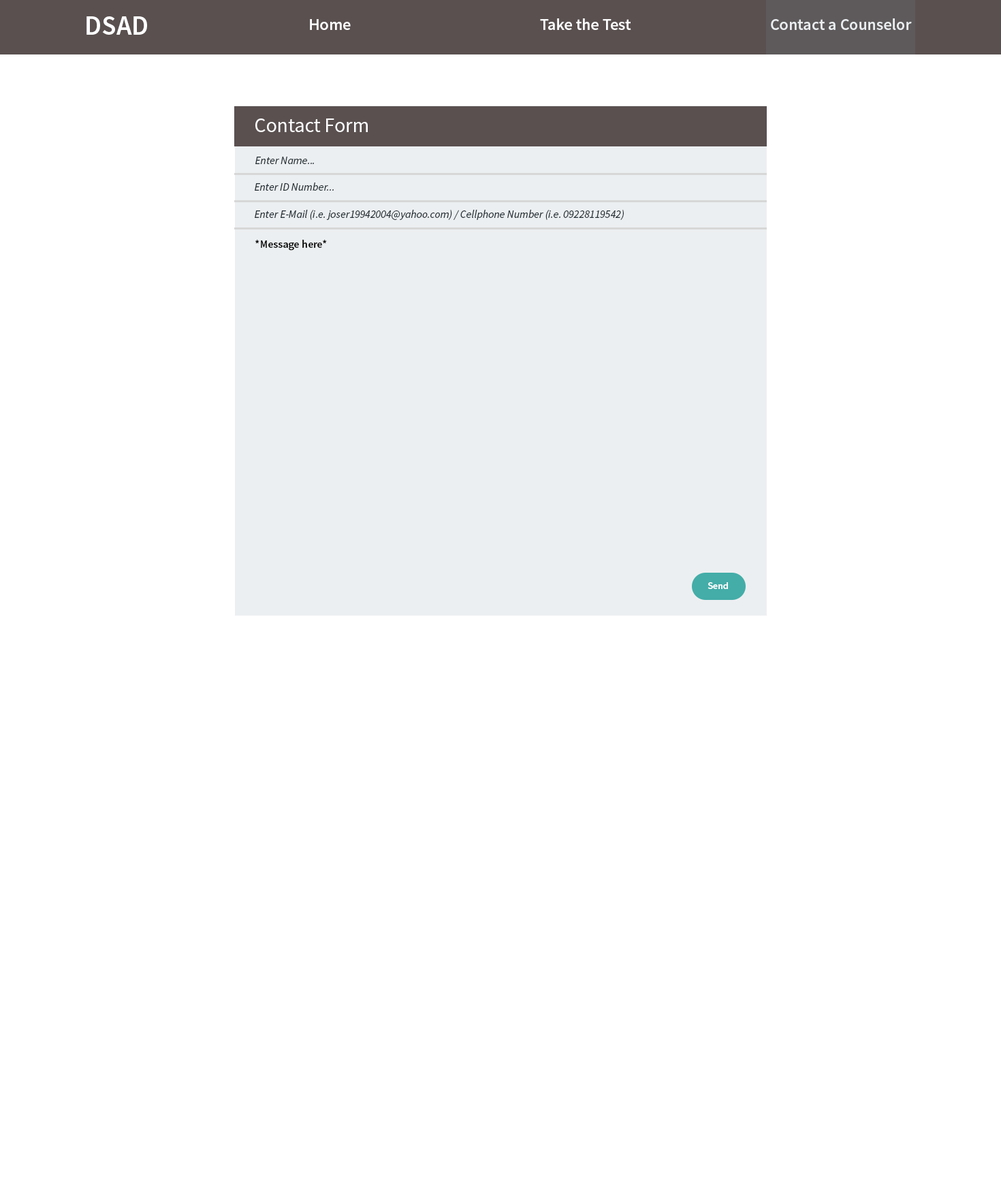
<style>
.page{position:relative;width:1001px;height:1191px;background:#ffffff}
.page>*{position:absolute;margin:0}
.t1{font:27.2px "SourceSansPro-Semibold";color:#ffffff}
.t2{font:16.3px "SourceSansPro-Semibold";color:#ffffff}
.t3{font:20.4px "SourceSansPro-Regular";color:#ffffff}
.t4{font:11px "SourceSansPro-It";color:#263238}
.t5{font:10.9px "SourceSansPro-Semibold";color:#000000}
.t6{font:9.5px "SourceSansPro-Semibold";color:#ffffff}
</style>
<div class="page">
<p class="t1" style="left:86px;top:16px;width:61px;height:19px">DSAD</p>
<p class="t2" style="left:310px;top:19px;width:41px;height:11px">Home</p>
<p class="t2" style="left:540px;top:18px;width:91px;height:12px">Take the Test</p>
<p class="t2" style="left:771px;top:18px;width:141px;height:12px">Contact a Counselor</p>
<p class="t3" style="left:255px;top:118px;width:113px;height:14px">Contact Form</p>
<p class="t4" style="left:255px;top:157px;width:59px;height:7px">Enter Name...</p>
<p class="t4" style="left:255px;top:183px;width:79px;height:8px">Enter ID Number...</p>
<p class="t4" style="left:255px;top:210px;width:369px;height:10px">Enter E-Mail (i.e. joser19942004@yahoo.com) / Cellphone Number (i.e. 09228119542)</p>
<p class="t5" style="left:255px;top:240px;width:72px;height:11px">*Message here*</p>
<p class="t6" style="left:708px;top:582px;width:20px;height:7px">Send</p>
</div>
